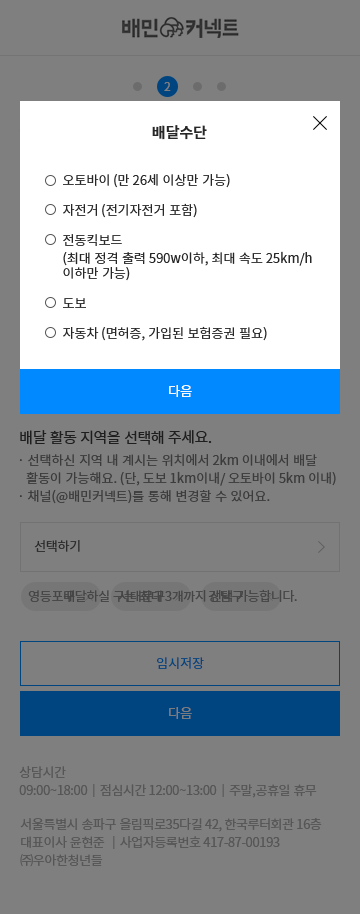
<style>
.page{position:relative;width:360px;height:914px;background:#7f7f7f}
.page>*{position:absolute;margin:0}
.t1{font:11.8px "NotoSansCJKkr-Regular";color:#7f7f7f}
.t2{font:15px "NotoSansCJKkr-Bold";color:#272727}
.t3{font:13px/30px "NotoSansCJKkr-Regular";color:#272727}
.t4{font:13px/18px "NotoSansCJKkr-Regular";color:#272727}
.t5{font:13px/15px "NotoSansCJKkr-Regular";color:#272727}
.t6{font:13px "NotoSansCJKkr-Regular";color:#ffffff}
.t7{font:15px "NotoSansCJKkr-Regular";letter-spacing:-0.03em;color:#1e1e1e}
.t8{font:13px/18px "NotoSansCJKkr-Regular";color:#3c3c3c}
.t9{font:13px "NotoSansCJKkr-Regular";letter-spacing:-0.03em;color:#2c2c2c}
.t10{font:13px "NotoSansCJKkr-Regular";letter-spacing:-0.03em;color:#454545}
.t11{font:13px "NotoSansCJKkr-Regular";color:#00457f}
.t12{font:13px "NotoSansCJKkr-Regular";color:#7f7f7f}
.t13{font:13px/18px "NotoSansCJKkr-Regular";letter-spacing:-0.03em;color:#565656}
</style>
<div class="page">
<p class="t1" style="left:164px;top:82px;width:7px;height:9px">2</p>
<p class="t2" style="left:152px;top:125px;width:55px;height:15px">배달수단</p>
<p class="t3" style="left:63px;top:174px;width:249px;height:167px">오토바이 (만 26세 이상만 가능)<br>자전거 (전기자전거 포함) <br>전동킥보드 <br><span class="t4">(최대 정격 출력 590w이하, 최대 속도 25km/h<br></span><span class="t5">이하만 가능)<br></span>도보<br>자동차 (면허증, 가입된 보험증권 필요)</p>
<p class="t6" style="left:169px;top:385px;width:23px;height:12px">다음</p>
<p class="t7" style="left:20px;top:430px;width:192px;height:15px">배달 활동 지역을 선택해 주세요.</p>
<p class="t8" style="left:19px;top:453px;width:317px;height:51px">· 선택하신 지역 내 계시는 위치에서 2km 이내에서 배달 <br>   활동이 가능해요. (단, 도보 1km이내/ 오토바이 5km 이내)<br>· 채널(@배민커넥트)를 통해 변경할 수 있어요.</p>
<p class="t9" style="left:34px;top:540px;width:46px;height:12px">선택하기</p>
<p class="t10" style="left:28px;top:590px;width:47px;height:12px">영등포구</p>
<p class="t10" style="left:64px;top:589px;width:233px;height:14px">배달하실 구는 최대 3개까지 선택 가능합니다.</p>
<p class="t10" style="left:118px;top:590px;width:47px;height:12px">서대문구</p>
<p class="t10" style="left:208px;top:590px;width:35px;height:12px">강남구</p>
<p class="t11" style="left:157px;top:657px;width:47px;height:12px">임시저장</p>
<p class="t12" style="left:169px;top:707px;width:23px;height:12px">다음</p>
<p class="t13" style="left:19px;top:766px;width:298px;height:32px">상담시간 <br>09:00~18:00│점심시간 12:00~13:00│주말,공휴일 휴무</p>
<p class="t13" style="left:20px;top:818px;width:302px;height:49px">서울특별시 송파구 올림픽로35다길 42, 한국루터회관 16층 <br>대표이사 윤현준 │사업자등록번호 417-87-00193<br>㈜우아한청년들</p>
</div>
